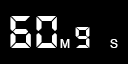
<style>
.page{position:relative;width:128px;height:64px;background:#000000}
.page>*{position:absolute;margin:0}
.t1{font:50px "DS-Digital-Bold";color:#ffffff}
.t2{font:33.3px "DS-Digital-Bold";color:#ffffff}
.t3{font:11.7px "ArialMT";color:#ffffff}
</style>
<div class="page">
<p class="t1" style="left:10px;top:16px;width:47px;height:32px">60</p>
<p class="t2" style="left:75px;top:27px;width:15px;height:21px">9</p>
<p class="t3" style="left:60px;top:39px;width:10px;height:9px">M</p>
<p class="t3" style="left:110px;top:39px;width:8px;height:9px">S</p>
</div>
